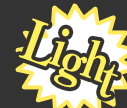
<style>
.page{position:relative;width:127px;height:108px;background:#333333}
.page>*{position:absolute;margin:0}
.t1{font:51.4px "RyuminPro-ExBold";letter-spacing:-0.08em;color:#fff15b;scale:0.9 1}
.t2{font:56px "RyuminPro-ExBold";letter-spacing:-0.08em;color:#fff15b;scale:0.9 1}
</style>
<div class="page">
<p class="t1" style="left:18px;top:18px;width:100px;height:80px;rotate:20deg"><span class="t2">L</span>ight</p>
</div>
